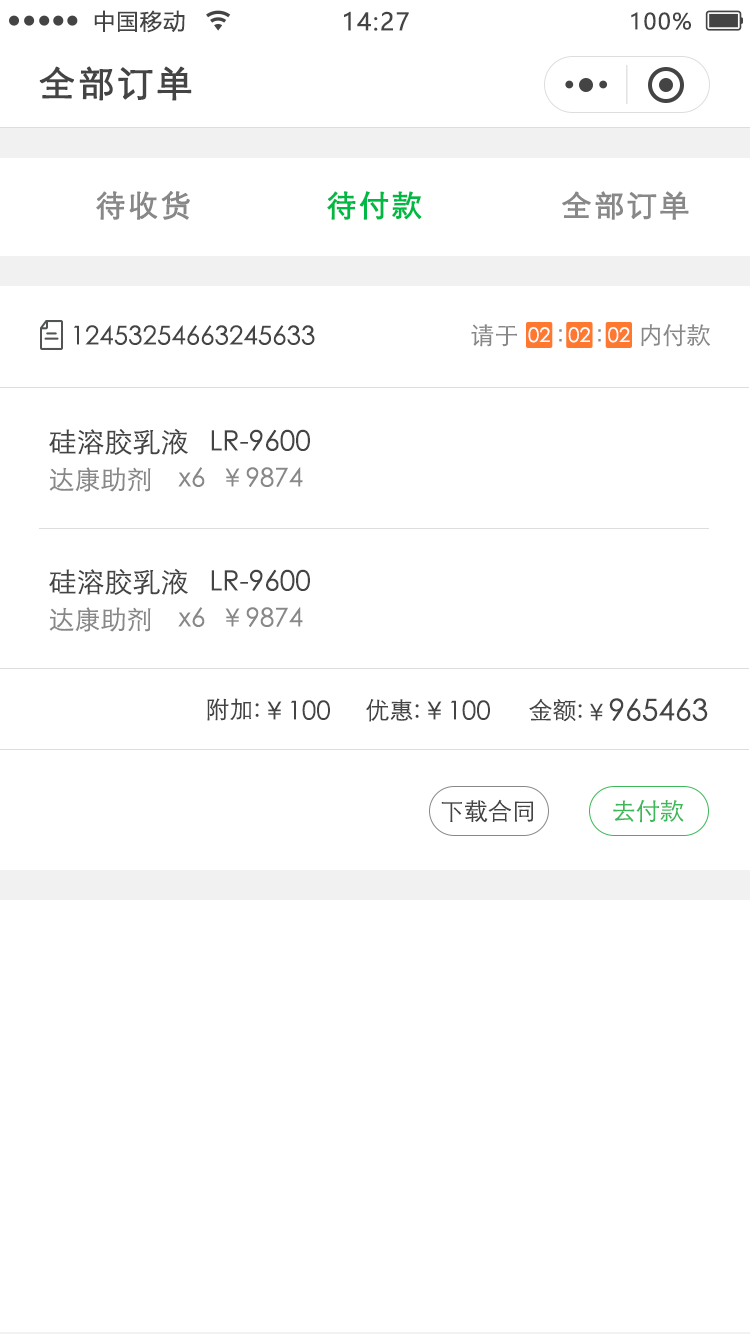
<style>
.page{position:relative;width:750px;height:1334px;background:#ffffff}
.page>*{position:absolute;margin:0}
.t1{font:22px "MicrosoftYaHei";letter-spacing:0.06em;color:#444444}
.t2{font:24px "MicrosoftYaHei";letter-spacing:0.06em;color:#444444}
.t3{font:36px "STXihei";letter-spacing:0.06em;color:#444444;font-weight:bold}
.t4{font:30px "STXihei";letter-spacing:0.06em;color:#888888;font-weight:bold}
.t5{font:30px "STXihei";letter-spacing:0.06em;color:#00b945;font-weight:bold}
.t6{font:26px "STXihei";color:#444444}
.t7{font:24px "STXihei";color:#888888}
.t8{font:20px "STXihei";color:#ffffff}
.t9{font:28px "STXihei";color:#444444}
.t10{font:26px "STXihei";color:#888888}
.t11{font:24px "STXihei";color:#444444}
.t12{font:30px "STXihei";color:#444444}
.t13{font:24px "STXihei";color:#3db858}
</style>
<div class="page">
<p class="t1" style="left:94px;top:10px;width:91px;height:23px">中国移动</p>
<p class="t2" style="left:344px;top:11px;width:65px;height:20px">14:27</p>
<p class="t1" style="left:631px;top:12px;width:60px;height:18px">100%</p>
<p class="t3" style="left:39px;top:66px;width:153px;height:35px">全部订单</p>
<p class="t4" style="left:96px;top:191px;width:94px;height:29px">待收货</p>
<p class="t5" style="left:327px;top:191px;width:95px;height:29px">待付款</p>
<p class="t4" style="left:562px;top:191px;width:127px;height:29px">全部订单</p>
<p class="t6" style="left:74px;top:325px;width:241px;height:20px">12453254663245633</p>
<p class="t7" style="left:471px;top:324px;width:46px;height:23px">请于</p>
<p class="t8" style="left:528px;top:327px;width:22px;height:16px">02</p>
<p class="t7" style="left:559px;top:329px;width:3px;height:13px">：</p>
<p class="t8" style="left:568px;top:327px;width:22px;height:16px">02</p>
<p class="t7" style="left:598px;top:329px;width:3px;height:13px">：</p>
<p class="t8" style="left:608px;top:327px;width:22px;height:16px">02</p>
<p class="t7" style="left:641px;top:324px;width:69px;height:23px">内付款</p>
<p class="t9" style="left:49px;top:428px;width:261px;height:27px">硅溶胶乳液   LR-9600</p>
<p class="t10" style="left:49px;top:467px;width:102px;height:25px">达康助剂</p>
<p class="t10" style="left:178px;top:467px;width:27px;height:20px">x6</p>
<p class="t10" style="left:225px;top:467px;width:78px;height:20px">￥9874</p>
<p class="t9" style="left:49px;top:568px;width:261px;height:27px">硅溶胶乳液   LR-9600</p>
<p class="t10" style="left:49px;top:607px;width:102px;height:25px">达康助剂</p>
<p class="t10" style="left:178px;top:607px;width:27px;height:20px">x6</p>
<p class="t10" style="left:225px;top:607px;width:78px;height:20px">￥9874</p>
<p class="t11" style="left:207px;top:698px;width:52px;height:23px">附加:</p>
<p class="t6" style="left:267px;top:700px;width:63px;height:20px">￥100</p>
<p class="t11" style="left:366px;top:699px;width:53px;height:23px">优惠:</p>
<p class="t6" style="left:427px;top:700px;width:63px;height:20px">￥100</p>
<p class="t11" style="left:529px;top:698px;width:53px;height:24px">金额:</p>
<p class="t12" style="left:590px;top:698px;width:118px;height:23px"><span class="t11">￥</span>965463</p>
<p class="t11" style="left:441px;top:799px;width:92px;height:24px">下载合同</p>
<p class="t13" style="left:613px;top:800px;width:71px;height:23px">去付款</p>
</div>
